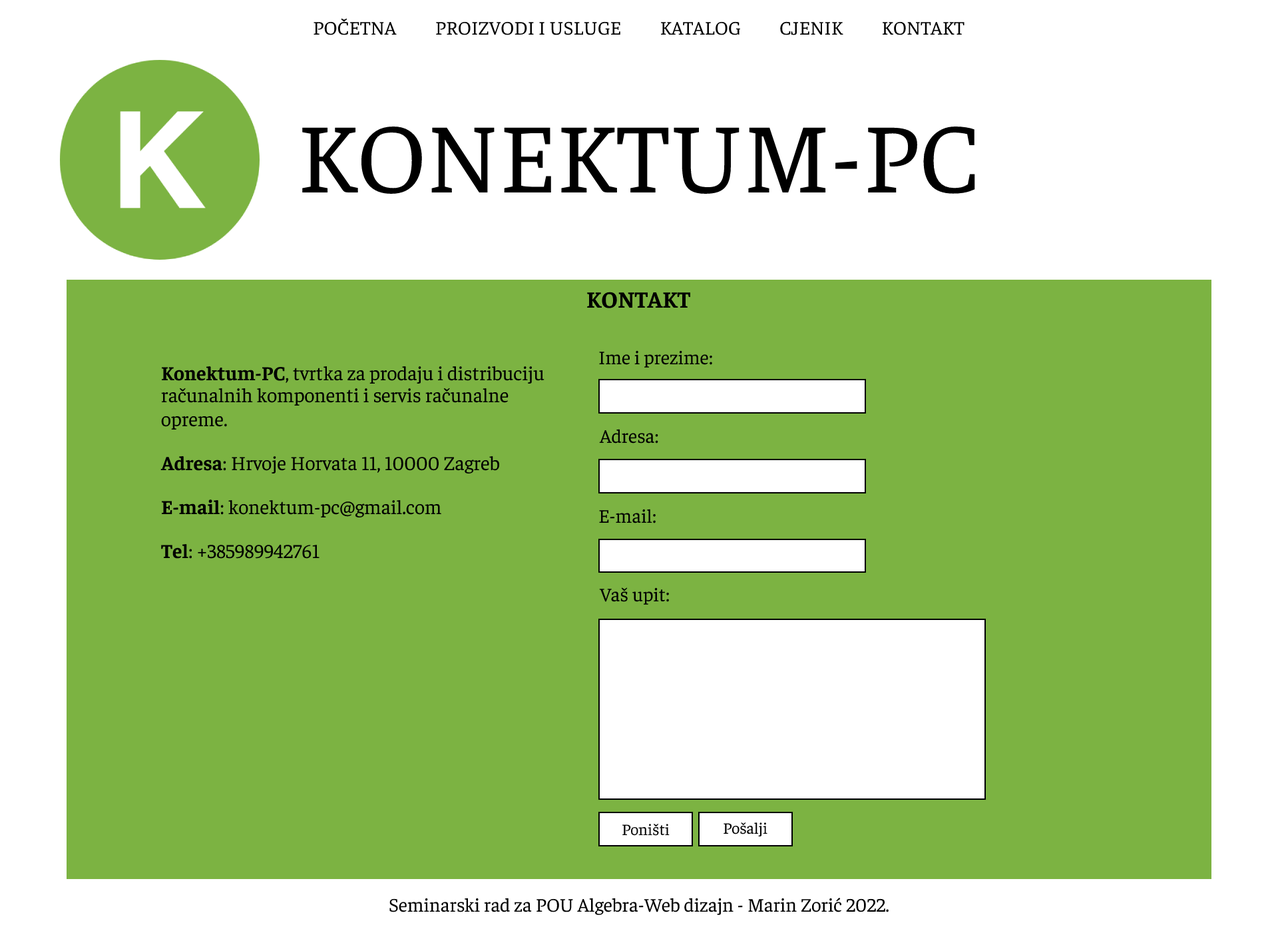
<style>
.page{position:relative;width:1278px;height:933px;background:#7cb342}
.page>*{position:absolute;margin:0}
.t1{font:19.3px "Faustina-Regular";color:#000000}
.t2{font:99.9px "Faustina-Regular";color:#000000}
.t3{font:23.3px "Faustina-Bold";color:#000000}
.t4{font:20px "Faustina-Regular";color:#000000}
.t5{font:20px "Faustina-Bold";color:#000000}
.t6{font:16px "Faustina-Regular";color:#000000}
</style>
<div class="page">
<p class="t1" style="left:314px;top:18px;width:651px;height:17px">POČETNA          PROIZVODI I USLUGE          KATALOG          CJENIK          KONTAKT</p>
<p class="t2" style="left:302px;top:127px;width:673px;height:67px">KONEKTUM-PC</p>
<p class="t3" style="left:587px;top:292px;width:104px;height:16px">KONTAKT</p>
<p class="t1" style="left:599px;top:350px;width:113px;height:18px">Ime i prezime:</p>
<p class="t4" style="left:160px;top:366px;width:385px;height:193px"><span class="t5">Konektum-PC</span>, tvrtka za prodaju i distribuciju<br>računalnih komponenti i servis računalne opreme.<br><br><span class="t5">Adresa</span>: Hrvoje Horvata 11, 10000 Zagreb<br><br><span class="t5">E-mail</span>: konektum-pc@gmail.com<br><br><span class="t5">Tel</span>: +385989942761</p>
<p class="t1" style="left:599px;top:429px;width:59px;height:14px">Adresa:</p>
<p class="t1" style="left:599px;top:509px;width:57px;height:14px">E-mail:</p>
<p class="t1" style="left:599px;top:587px;width:70px;height:18px">Vaš upit:</p>
<p class="t6" style="left:724px;top:822px;width:44px;height:14px">Pošalji</p>
<p class="t6" style="left:623px;top:823px;width:47px;height:13px">Poništi</p>
<p class="t1" style="left:389px;top:898px;width:500px;height:17px">Seminarski rad za POU Algebra-Web dizajn - Marin Zorić 2022.</p>
</div>
